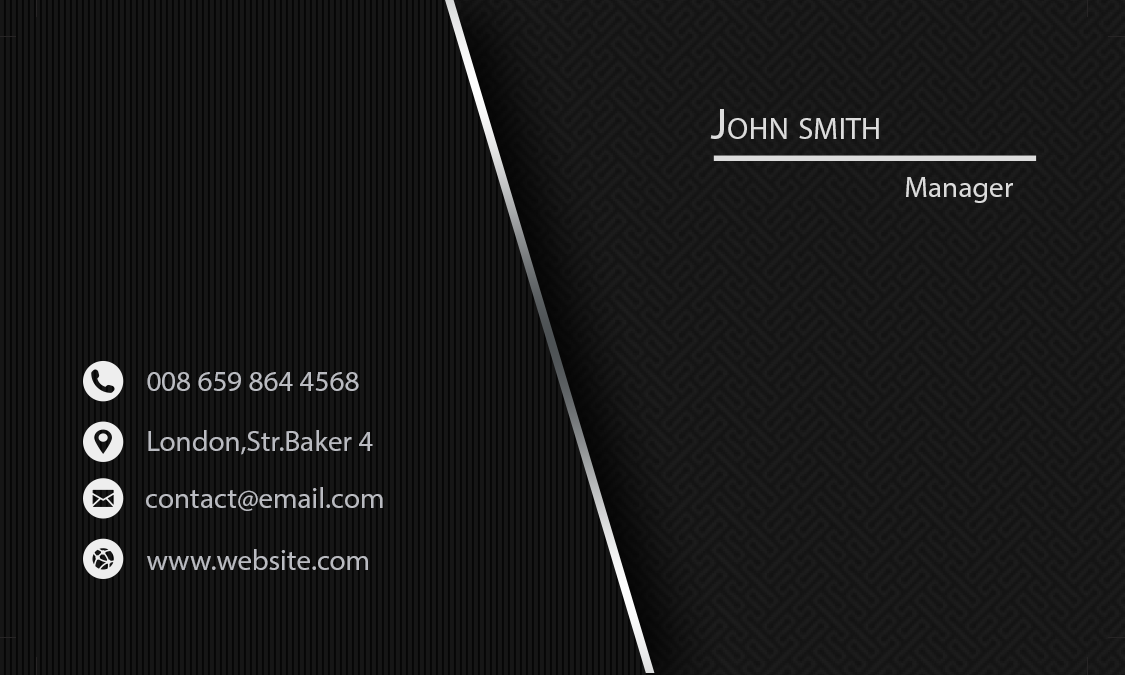
<style>
.page{position:relative;width:1125px;height:675px;background:#161616}
.page>*{position:absolute;margin:0}
.t1{font:44.1px "MyriadPro-Regular";color:#dcdcdc;font-variant:small-caps}
.t2{font:29.2px "MyriadPro-Regular";color:#dcdcdc}
.t3{font:29.2px "MyriadPro-Regular";color:#babcc1}
</style>
<div class="page">
<p class="t1" style="left:710px;top:109px;width:169px;height:30px">John smith</p>
<p class="t2" style="left:906px;top:177px;width:107px;height:26px">Manager</p>
<p class="t3" style="left:147px;top:372px;width:212px;height:19px">008 659 864 4568</p>
<p class="t3" style="left:148px;top:430px;width:225px;height:25px">London,Str.Baker 4</p>
<p class="t3" style="left:146px;top:487px;width:237px;height:24px">contact@email.com</p>
<p class="t3" style="left:147px;top:549px;width:221px;height:21px">www.website.com</p>
</div>
